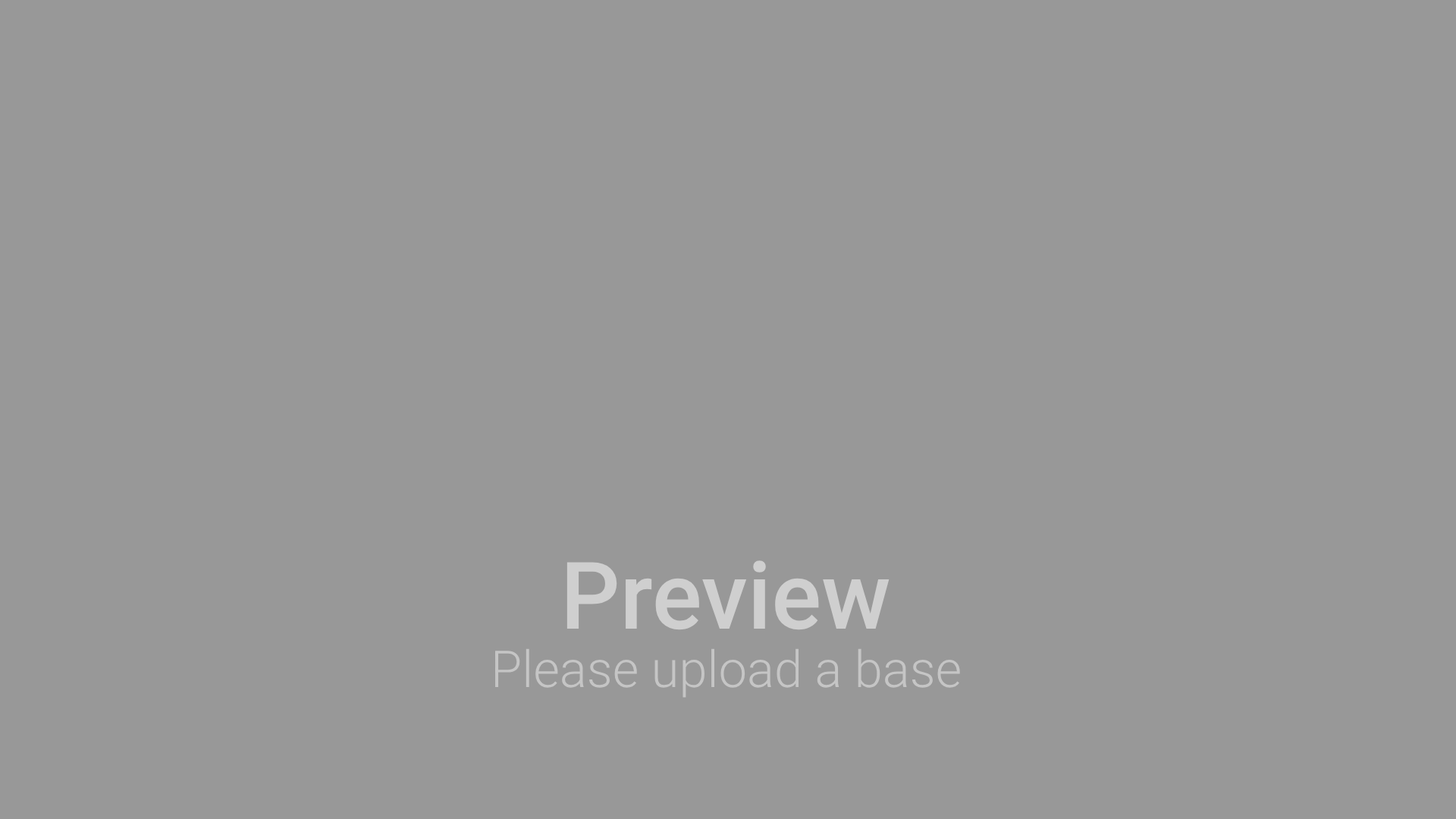
<style>
.page{position:relative;width:1456px;height:819px;background:#989898}
.page>*{position:absolute;margin:0}
.t1{font:93.3px "Roboto-Medium";color:#cfcfcf}
.t2{font:50.8px "Roboto-Light";color:#c5c5c5}
</style>
<div class="page">
<p class="t1" style="left:566px;top:560px;width:324px;height:70px">Preview</p>
<p class="t2" style="left:495px;top:648px;width:465px;height:50px">Please upload a base</p>
</div>
